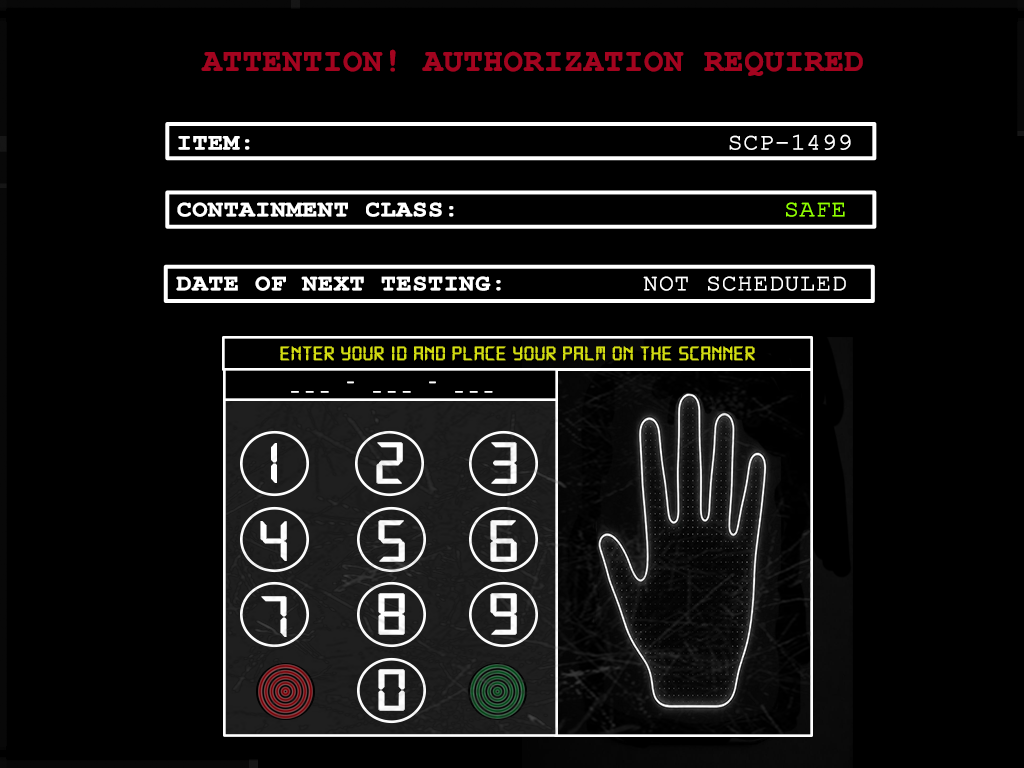
<style>
.page{position:relative;width:1024px;height:768px;background:#000000}
.page>*{position:absolute;margin:0}
.t1{font:32px "CourierNewPS-BoldMT";color:#a3041f;text-transform:uppercase;font-weight:bold}
.t2{font:40px "CourierNewPS-BoldMT";color:#a3041f;text-transform:uppercase;font-weight:bold}
.t3{font:23.3px "CourierNewPSMT";color:#ffffff;text-transform:uppercase;font-weight:bold;scale:1.07 1}
.t4{font:23.3px "CourierNewPS-BoldMT";color:#ffffff;text-transform:uppercase;font-weight:bold;scale:1.07 1}
.t5{font:23.3px "CourierNewPSMT";color:#90ff00;text-transform:uppercase;font-weight:bold;scale:1.07 1}
.t6{font:29.1px "CourierNewPSMT";color:#000000;text-transform:uppercase;font-weight:bold;scale:1.07 1}
.t7{font:21.3px "DS-Digital";color:#d4de12;text-transform:uppercase;font-weight:bold}
.t8{font:21.3px "DS-Digital";color:#ffffff;text-transform:uppercase;font-weight:bold}
.t9{font:64px "DS-Digital";color:#ffffff;text-transform:uppercase;font-weight:bold}
</style>
<div class="page">
<p class="t1" style="left:201px;top:49px;width:662px;height:27px"><span class="t2">    </span>Attention! Authorization required</p>
<p class="t3" style="left:178px;top:134px;width:673px;height:16px"><span class="t4">Item:</span>                  SCP-1499</p>
<p class="t4" style="left:177px;top:202px;width:668px;height:15px">containment Class:             <span class="t5">Safe</span></p>
<p class="t4" style="left:176px;top:276px;width:670px;height:15px"><span class="t6"><br></span>Date of Next Testing:<span class="t3">      not scheduled</span></p>
<p class="t7" style="left:280px;top:346px;width:475px;height:15px">Enter your ID and place your palm on the scanner</p>
<p class="t8" style="left:291px;top:381px;width:202px;height:12px">_ _ _   -   _ _ _   -   _ _ _</p>
<p class="t9" style="left:271px;top:443px;width:6px;height:40px">1</p>
<p class="t9" style="left:376px;top:442px;width:27px;height:42px">2</p>
<p class="t9" style="left:491px;top:442px;width:26px;height:42px">3</p>
<p class="t9" style="left:260px;top:521px;width:27px;height:40px">4</p>
<p class="t9" style="left:378px;top:520px;width:27px;height:42px">5</p>
<p class="t9" style="left:490px;top:520px;width:27px;height:42px">6</p>
<p class="t9" style="left:378px;top:593px;width:27px;height:42px">8</p>
<p class="t9" style="left:490px;top:593px;width:27px;height:42px">9</p>
<p class="t9" style="left:261px;top:596px;width:26px;height:41px">7</p>
<p class="t9" style="left:378px;top:669px;width:27px;height:42px">0</p>
</div>
